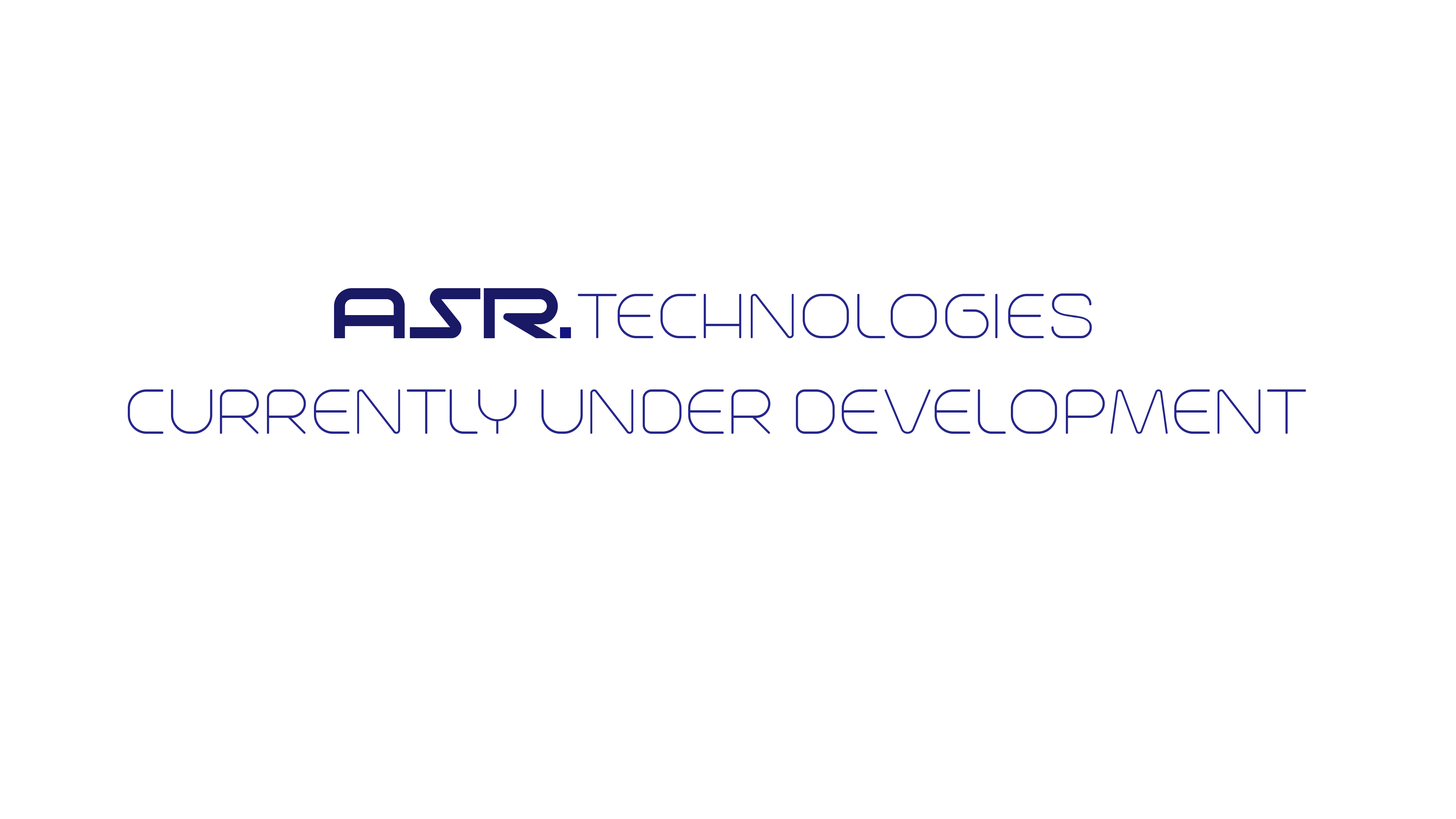
<style>
.page{position:relative;width:1456px;height:819px;background:#ffffff}
.page>*{position:absolute;margin:0}
.t1{font:79.6px "Trench-Thin";color:#26268c}
.t2{font:91px "moonhouse";color:#191965}
.t3{font:91px "moonhouse";color:#141480}
</style>
<div class="page">
<p class="t1" style="left:128px;top:288px;width:1178px;height:146px;text-align:center"><span class="t2">ASR</span><span class="t3">.</span>TECHNOLOGIES<br>CURRENTLY UNDER DEVELOPMENT</p>
</div>
